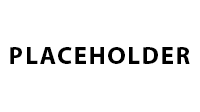
<style>
.page{position:relative;width:200px;height:112px;background:#ffffff}
.page>*{position:absolute;margin:0}
.t1{font:25.3px "MyriadPro-Bold";letter-spacing:0.06em;color:#000000}
</style>
<div class="page">
<p class="t1" style="left:10px;top:47px;width:180px;height:17px">PLACEHOLDER</p>
</div>
